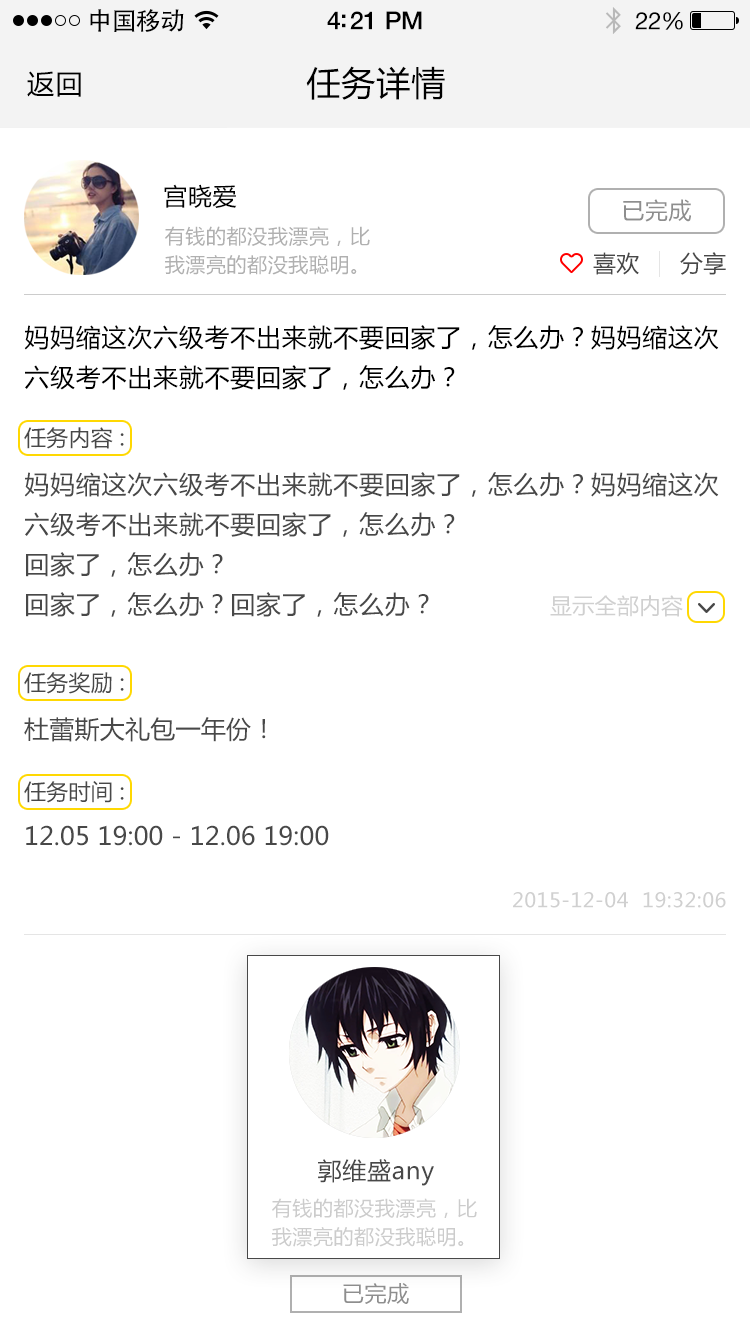
<style>
.page{position:relative;width:750px;height:1334px;background:#ffffff}
.page>*{position:absolute;margin:0}
.t1{font:25px "AdobeHeitiStd-Regular";letter-spacing:-0.025em;color:#000000}
.t2{font:25px "HelveticaNeue-Medium";letter-spacing:-0.02em;color:#000000}
.t3{font:24px "HelveticaNeue";letter-spacing:-0.02em;color:#000000}
.t4{font:27px "MicrosoftYaHei";letter-spacing:0.05em;color:#000000}
.t5{font:34px "MicrosoftYaHei";letter-spacing:0.03em;color:#000000}
.t6{font:24px "MicrosoftYaHei";letter-spacing:0.03em;color:#000000}
.t7{font:23px "MicrosoftYaHei";letter-spacing:0.03em;color:#8e8e8e}
.t8{font:20px/70px "MicrosoftYaHei";letter-spacing:0.03em;color:#b0b0b0}
.t9{font:23px "MicrosoftYaHei";letter-spacing:0.01em;color:#555555}
.t10{font:25px/70px "MicrosoftYaHei";letter-spacing:0.03em;color:#000000}
.t11{font:22px "MicrosoftYaHei";letter-spacing:0.01em;color:#555555}
.t12{font:25px/70px "MicrosoftYaHei";letter-spacing:0.03em;color:#484848}
.t13{font:22px "MicrosoftYaHei";letter-spacing:0.01em;color:#d0d0d0}
.t14{font:25px "MicrosoftYaHei";letter-spacing:0.01em;color:#484848}
.t15{font:25px "MicrosoftYaHei";letter-spacing:0.01em;color:#555555}
.t16{font:20px "MicrosoftYaHei";letter-spacing:0.03em;color:#d0d0d0}
.t17{font:24px "MicrosoftYaHei";letter-spacing:0.03em;color:#484848}
.t18{font:20px/70px "MicrosoftYaHei";letter-spacing:0.03em;color:#cccccc}
.t19{font:22px "MicrosoftYaHei";letter-spacing:0.03em;color:#8e8e8e}
</style>
<div class="page">
<p class="t1" style="left:90px;top:9px;width:94px;height:23px">中国移动</p>
<p class="t2" style="left:327px;top:11px;width:95px;height:19px">4:21 PM</p>
<p class="t3" style="left:635px;top:12px;width:48px;height:18px">22%</p>
<p class="t4" style="left:27px;top:71px;width:54px;height:26px">返回</p>
<p class="t5" style="left:306px;top:66px;width:139px;height:34px">任务详情</p>
<p class="t6" style="left:164px;top:184px;width:73px;height:24px">宫晓爱</p>
<p class="t7" style="left:623px;top:199px;width:68px;height:23px">已完成</p>
<p class="t8" style="left:165px;top:226px;width:205px;height:49px">有钱的都没我漂亮，比<br>我漂亮的都没我聪明。</p>
<p class="t9" style="left:593px;top:252px;width:46px;height:23px">喜欢</p>
<p class="t9" style="left:680px;top:252px;width:46px;height:23px">分享</p>
<p class="t10" style="left:24px;top:325px;width:695px;height:65px">妈妈缩这次六级考不出来就不要回家了，怎么办？妈妈缩这次<br>六级考不出来就不要回家了，怎么办？</p>
<p class="t11" style="left:24px;top:427px;width:100px;height:22px">任务内容 :</p>
<p class="t12" style="left:24px;top:472px;width:695px;height:145px">妈妈缩这次六级考不出来就不要回家了，怎么办？妈妈缩这次<br>六级考不出来就不要回家了，怎么办？<br>回家了，怎么办？<br>回家了，怎么办？回家了，怎么办？</p>
<p class="t13" style="left:550px;top:595px;width:133px;height:22px">显示全部内容</p>
<p class="t11" style="left:24px;top:672px;width:100px;height:22px">任务奖励 :</p>
<p class="t14" style="left:24px;top:717px;width:242px;height:25px">杜蕾斯大礼包一年份！</p>
<p class="t11" style="left:24px;top:781px;width:100px;height:22px">任务时间 :</p>
<p class="t15" style="left:26px;top:825px;width:303px;height:21px">12.05 19:00 - 12.06 19:00</p>
<p class="t16" style="left:513px;top:892px;width:213px;height:16px">2015-12-04  19:32:06</p>
<p class="t17" style="left:318px;top:1159px;width:116px;height:27px">郭维盛any</p>
<p class="t18" style="left:272px;top:1198px;width:205px;height:49px">有钱的都没我漂亮，比<br>我漂亮的都没我聪明。</p>
<p class="t19" style="left:343px;top:1283px;width:66px;height:21px">已完成</p>
</div>
